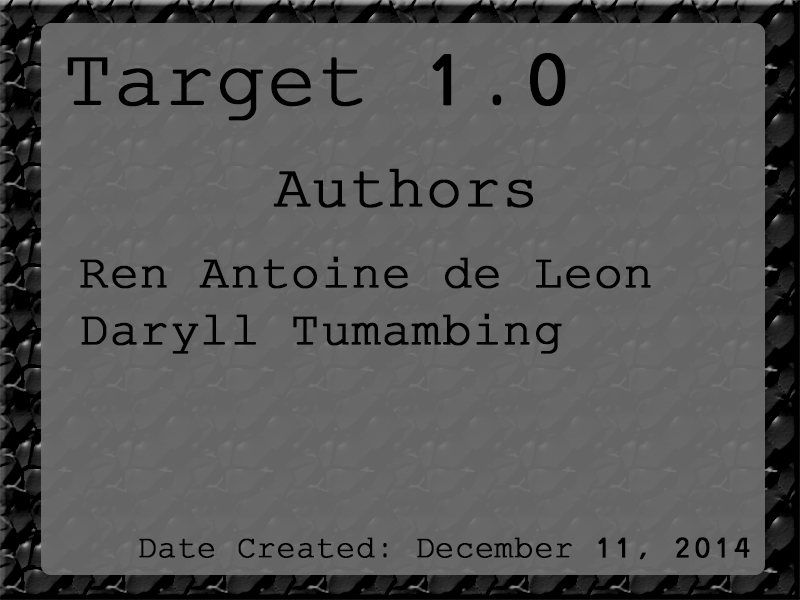
<style>
.page{position:relative;width:800px;height:600px;background:#656565}
.page>*{position:absolute;margin:0}
.t1{font:81.6px "MiriamFixed";color:#000000;font-weight:bold}
.t2{font:60.8px "MiriamFixed";color:#000000;font-weight:bold}
.t3{font:48.3px "MiriamFixed";color:#000000;font-weight:bold}
.t4{font:31.6px "MiriamFixed";color:#000000;font-weight:bold}
</style>
<div class="page">
<p class="t1" style="left:67px;top:53px;width:499px;height:68px">Target 1.0</p>
<p class="t2" style="left:273px;top:168px;width:260px;height:40px">Authors</p>
<p class="t3" style="left:80px;top:256px;width:571px;height:98px">Ren Antoine de Leon<br>Daryll Tumambing</p>
<p class="t4" style="left:139px;top:537px;width:611px;height:23px">Date Created: December 11, 2014</p>
</div>
